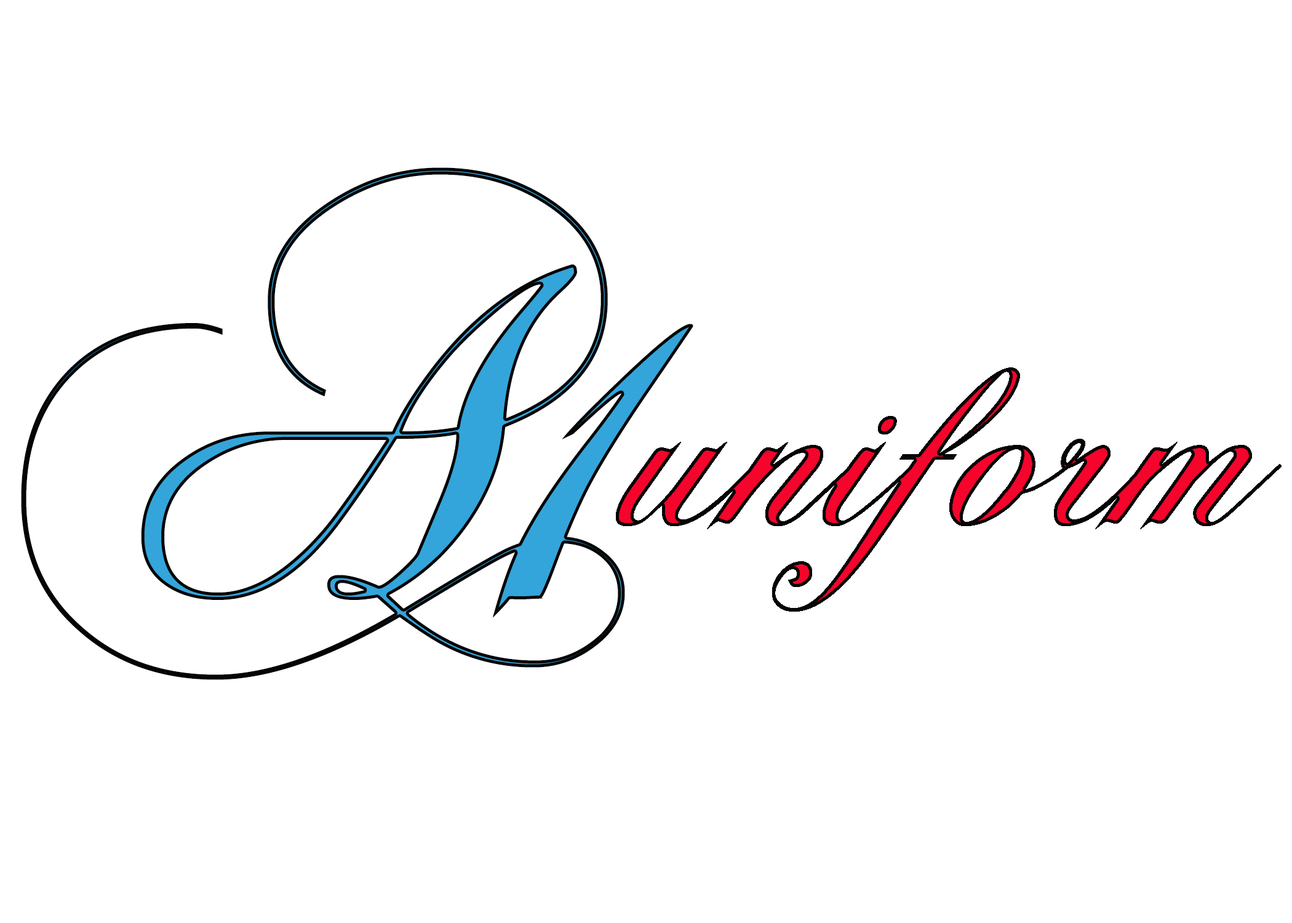
<style>
.page{position:relative;width:1292px;height:923px;background:#ffffff}
.page>*{position:absolute;margin:0}
.t1{font:488.4px "VNIChopsNormal";letter-spacing:-0.025em}
.t2{font:73.5px "Jokerman-Regular";letter-spacing:-0.01em;scale:1.5 1}
.t3{font:256.4px "VNIChopsNormal";font-style:italic}
</style>
<div class="page">
<p class="t1" style="left:21px;top:167px;width:672px;height:513px"><span class="t2"><br></span>A1</p>
<p class="t3" style="left:616px;top:367px;width:666px;height:245px">uniform</p>
</div>
